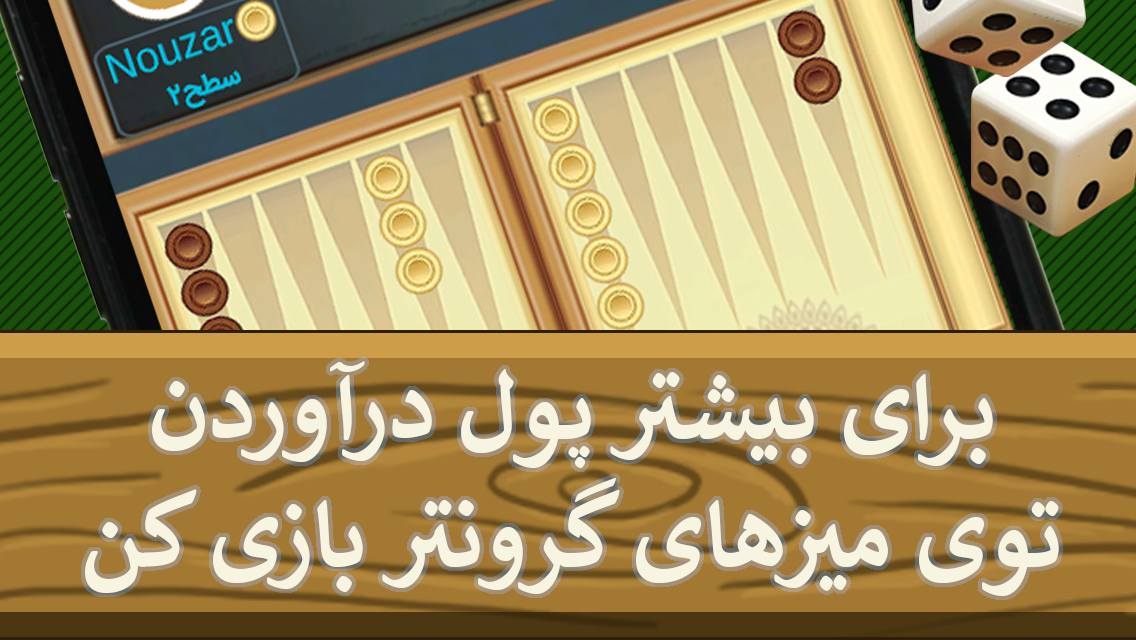
<style>
.page{position:relative;width:1136px;height:640px}
.page>*{position:absolute;margin:0}
.t1{font:106.3px "Calibri-Bold";color:#f7f5e1}
</style>
<div class="page">
<p class="t1" style="left:85px;top:361px;width:974px;height:235px;text-align:center">برای بیشتر پول درآوردن<br>توی میزهای گرونتر بازی کن</p>
</div>
